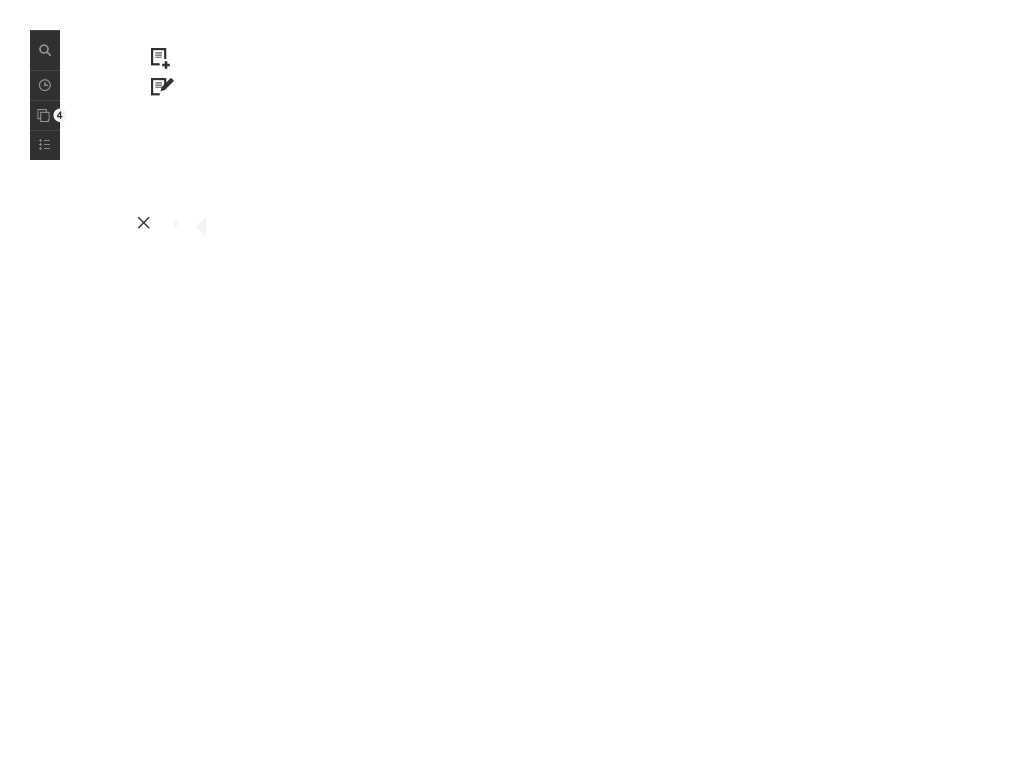
<style>
.page{position:relative;width:1024px;height:768px;background:#ffffff}
.page>*{position:absolute;margin:0}
.t1{font:10px "HelveticaNeueLTStd-Md";letter-spacing:0.025em;color:#303030}
</style>
<div class="page">
<p class="t1" style="left:57px;top:111px;width:6px;height:8px">4</p>
</div>
